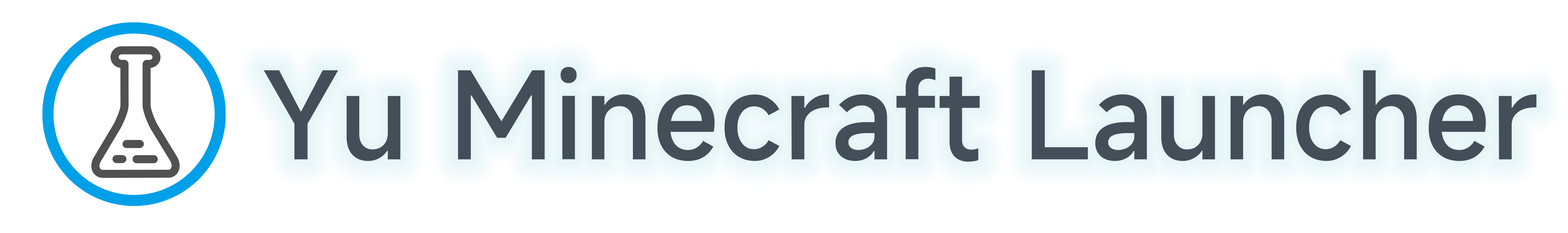
<style>
.page{position:relative;width:1568px;height:233px;background:#ffffff}
.page>*{position:absolute;margin:0}
.t1{font:115px "MiSans-Medium";color:#444e58}
</style>
<div class="page">
<p class="t1" style="left:264px;top:67px;width:1272px;height:94px">Yu Minecraft Launcher</p>
</div>
